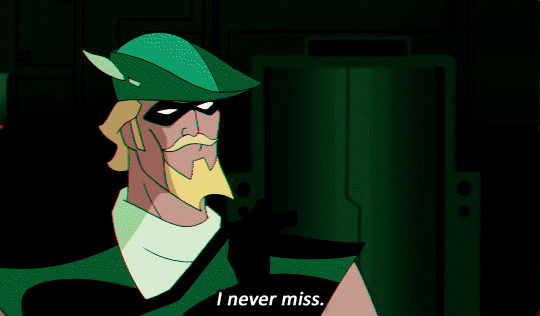
<style>
.page{position:relative;width:540px;height:316px;background:#000000}
.page>*{position:absolute;margin:0}
.t1{font:20px "Calibri";color:#ffffff;font-weight:bold;font-style:italic}
</style>
<div class="page">
<p class="t1" style="left:217px;top:291px;width:107px;height:15px">I never miss.</p>
</div>
